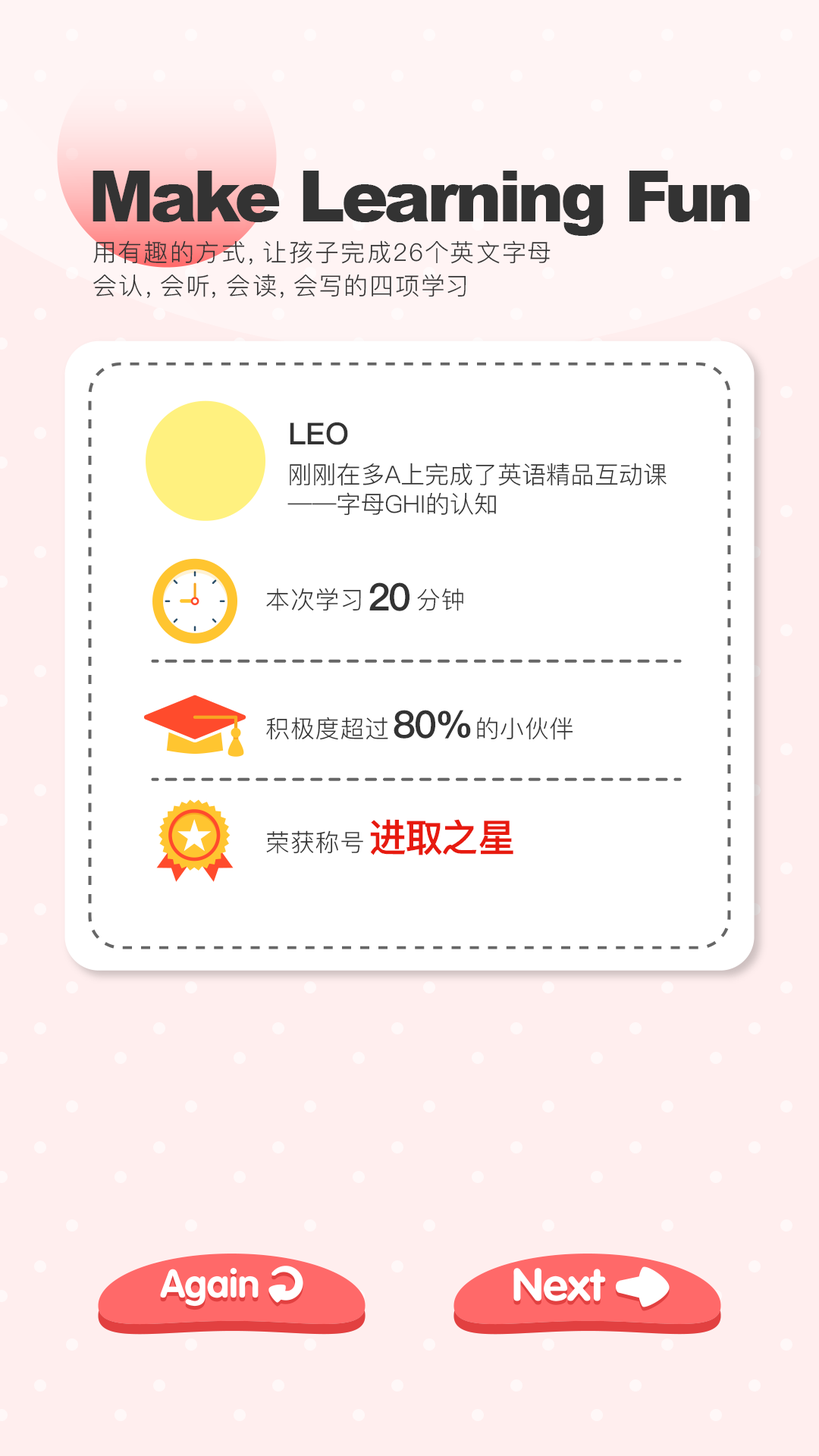
<style>
.page{position:relative;width:819px;height:1456px;background:#ffeeee}
.page>*{position:absolute;margin:0}
.t1{font:70.5px "Arial-Black";letter-spacing:-0.046em;color:#333333}
.t2{font:24.3px/32.8px "PingFang-SC-Regular";letter-spacing:0.1em;color:#333333}
.t3{font:30.3px "PingFang-SC-Heavy";color:#333333}
.t4{font:24.3px "PingFang-SC-Regular";color:#333333}
.t5{font:37.9px "PingFang-SC-Heavy";letter-spacing:-0.046em;color:#333333}
.t6{font:37.9px "PingFang-SC-Heavy";letter-spacing:-0.046em;color:#e71a0f}
</style>
<div class="page">
<p class="t1" style="left:93px;top:171px;width:657px;height:65px">Make Learning Fun</p>
<p class="t2" style="left:93px;top:240px;width:458px;height:58px">用有趣的方式，让孩子完成26个英文字母<br>会认，会听，会读，会写的四项学习</p>
<p class="t3" style="left:290px;top:422px;width:58px;height:23px">LEO</p>
<p class="t4" style="left:287px;top:463px;width:380px;height:53px">刚刚在多A上完成了英语精品互动课——字母GHI的认知</p>
<p class="t4" style="left:266px;top:588px;width:95px;height:23px">本次学习</p>
<p class="t5" style="left:369px;top:582px;width:40px;height:29px">20</p>
<p class="t4" style="left:417px;top:588px;width:46px;height:23px">分钟</p>
<p class="t5" style="left:394px;top:710px;width:77px;height:29px">80%</p>
<p class="t4" style="left:266px;top:717px;width:122px;height:23px">积极度超过</p>
<p class="t4" style="left:477px;top:717px;width:96px;height:23px">的小伙伴</p>
<p class="t6" style="left:370px;top:819px;width:143px;height:36px">进取之星</p>
<p class="t4" style="left:266px;top:830px;width:97px;height:24px">荣获称号</p>
</div>
